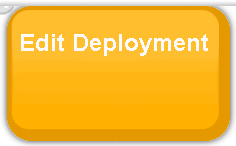
<style>
.page{position:relative;width:236px;height:146px;background:#ffbe2e}
.page>*{position:absolute;margin:0}
.t1{font:24px "Arial-BoldMT";color:#fdfafb}
</style>
<div class="page">
<p class="t1" style="left:21px;top:34px;width:187px;height:22px">Edit Deployment</p>
</div>
